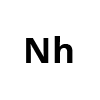
<style>
.page{position:relative;width:100px;height:100px;background:#ffffff}
.page>*{position:absolute;margin:0}
.t1{font:35px "OpenSans-Bold";color:#000000}
</style>
<div class="page">
<p class="t1" style="left:26px;top:36px;width:47px;height:27px">Nh</p>
</div>
